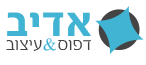
<style>
.page{position:relative;width:146px;height:65px;background:#ffffff}
.page>*{position:absolute;margin:0}
.t1{font:44.7px "FbEleganti-Bold";letter-spacing:0.02em;color:#41b3d3;scale:1.1 1}
.t2{font:19px "FbEleganti-Regular";color:#444444;scale:1.04 1}
.t3{font:19px "FbEleganti-Regular";color:#41b3d3;scale:1.04 1}
</style>
<div class="page">
<p class="t1" style="left:7px;top:12px;width:84px;height:24px">אדיב</p>
<p class="t2" style="left:6px;top:38px;width:85px;height:13px">דפוס<span class="t3">&amp;</span>עיצוב</p>
</div>
